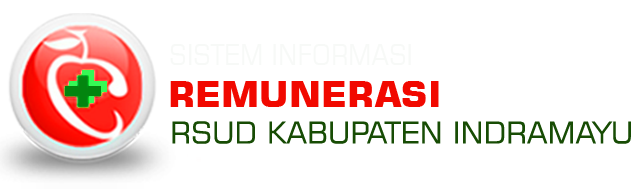
<style>
.page{position:relative;width:642px;height:189px;background:#ffffff}
.page>*{position:absolute;margin:0}
.t1{font:28.2px "Square721BT-Roman";color:#f7f9f7;scale:0.88 1}
.t2{font:36.4px "Square721BT-Bold";color:#f10900;scale:1.04 1}
.t3{font:30px "Square721BT-Roman";color:#174c04}
</style>
<div class="page">
<p class="t1" style="left:170px;top:44px;width:241px;height:21px">SISTEM INFORMASI</p>
<p class="t2" style="left:170px;top:81px;width:269px;height:26px">REMUNERASI</p>
<p class="t3" style="left:172px;top:121px;width:459px;height:23px">RSUD KABUPATEN INDRAMAYU</p>
</div>
